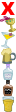
<style>
.page{position:relative;width:16px;height:112px;background:#ffffff}
.page>*{position:absolute;margin:0}
.t1{font:18px "Arial-Black";color:#ff0000}
</style>
<div class="page">
<p class="t1" style="left:1px;top:2px;width:14px;height:13px">X</p>
</div>
